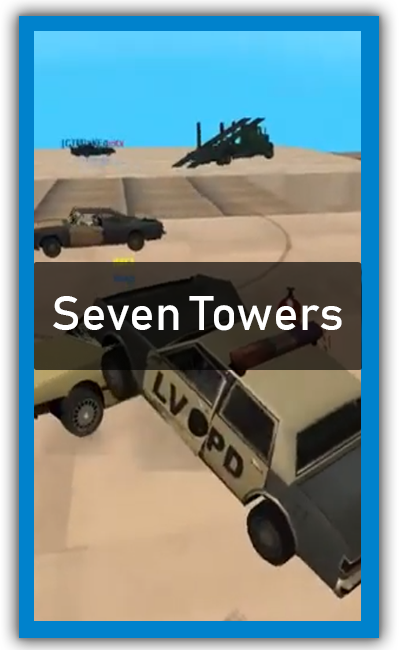
<style>
.page{position:relative;width:400px;height:650px}
.page>*{position:absolute;margin:0}
.t1{font:48px "Bahnschrift";color:#ffffff}
</style>
<div class="page">
<p class="t1" style="left:53px;top:296px;width:289px;height:35px">Seven Towers</p>
</div>
